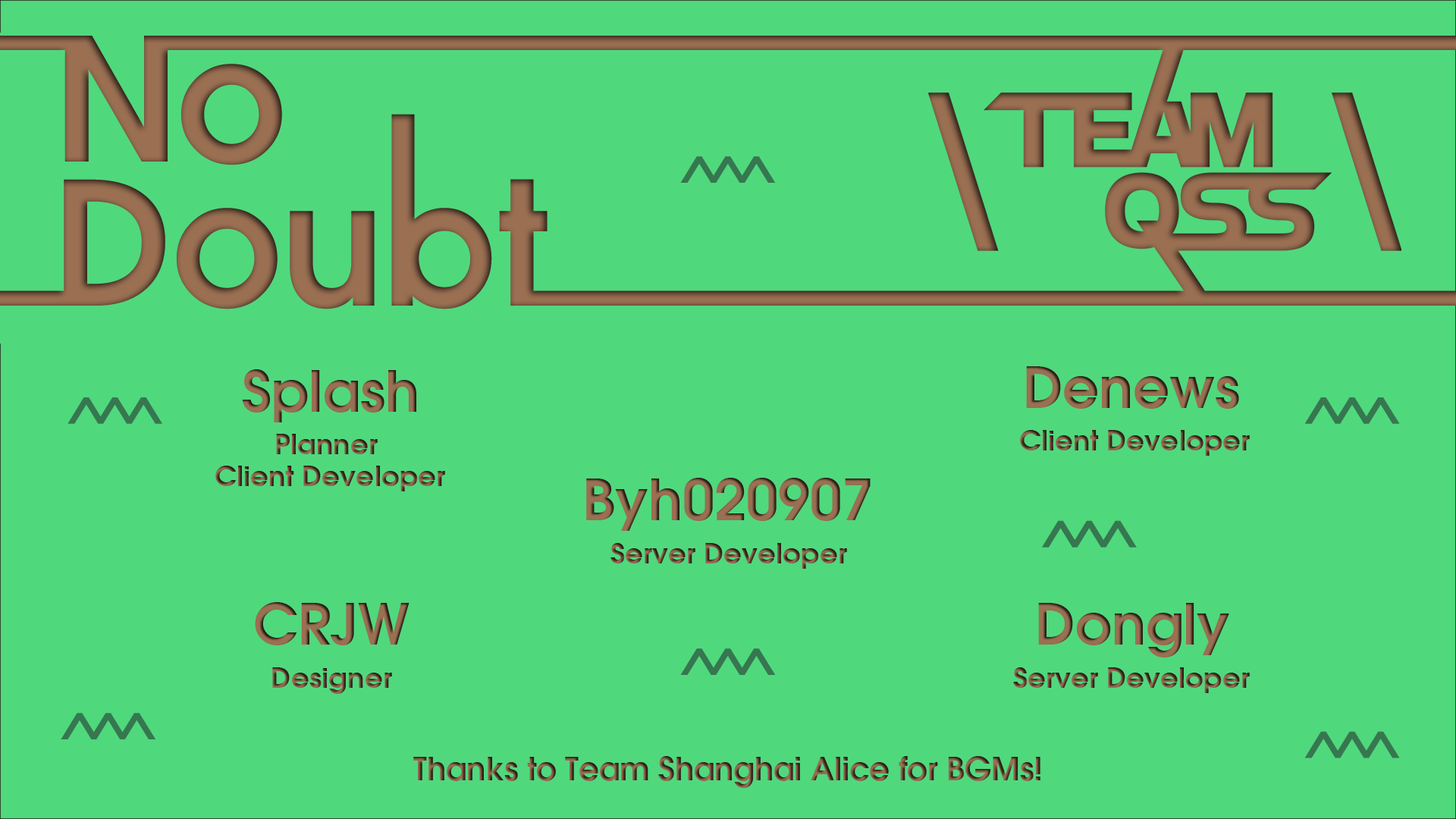
<style>
.page{position:relative;width:1456px;height:819px;background:#50d87d}
.page>*{position:absolute;margin:0}
.t1{font:56.9px "AvantGarde-Demi";color:#9a6f52}
.t2{font:28.4px/31.6px "AvantGarde-Demi"}
.t3{font:28.4px "AvantGarde-Demi"}
.t4{font:31.6px "AvantGarde-Demi"}
</style>
<div class="page">
<p class="t1" style="left:242px;top:369px;width:174px;height:53px">Splash</p>
<p class="t1" style="left:1026px;top:366px;width:213px;height:43px">Denews</p>
<p class="t2" style="left:215px;top:434px;width:230px;height:57px;text-align:center">Planner <br>Client Developer</p>
<p class="t3" style="left:1020px;top:430px;width:230px;height:26px">Client Developer</p>
<p class="t1" style="left:586px;top:478px;width:285px;height:53px">Byh020907</p>
<p class="t3" style="left:610px;top:543px;width:237px;height:26px">Server Developer</p>
<p class="t1" style="left:255px;top:602px;width:154px;height:43px">CRJW</p>
<p class="t1" style="left:1038px;top:603px;width:191px;height:54px">Dongly</p>
<p class="t3" style="left:272px;top:667px;width:120px;height:27px">Designer</p>
<p class="t3" style="left:1013px;top:667px;width:237px;height:26px">Server Developer</p>
<p class="t4" style="left:413px;top:756px;width:627px;height:32px">Thanks to Team Shanghai Alice for BGMs!</p>
</div>
